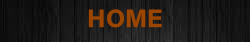
<style>
.page{position:relative;width:250px;height:42px}
.page>*{position:absolute;margin:0}
.t1{font:25px "AcuminConcept-Bold";color:#9a4500}
</style>
<div class="page">
<p class="t1" style="left:88px;top:9px;width:74px;height:19px">HOME</p>
</div>
